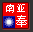
<style>
.page{position:relative;width:33px;height:32px;background:#f20000}
.page>*{position:absolute;margin:0}
.t1{font:10.4px "SimSun";color:#ffffff}
.t2{font:11.7px "SimSun";color:#ffffff}
</style>
<div class="page">
<p class="t1" style="left:6px;top:4px;width:19px;height:9px">南亚</p>
<p class="t2" style="left:16px;top:15px;width:11px;height:12px">奉</p>
</div>
